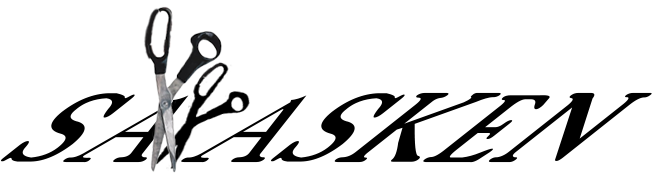
<style>
.page{position:relative;width:662px;height:189px;background:#ffffff}
.page>*{position:absolute;margin:0}
.t1{font:215.9px "18thCentury";color:#000000;scale:0.69 1}
</style>
<div class="page">
<p class="t1" style="left:0px;top:92px;width:652px;height:71px">SA ASKEN</p>
</div>
